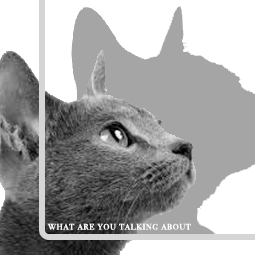
<style>
.page{position:relative;width:255px;height:255px;background:#ffffff}
.page>*{position:absolute;margin:0}
.t1{font:12.5px "BodoniSvtyTwoSCITCTT-Book";letter-spacing:0.03em;color:#ffffff}
</style>
<div class="page">
<p class="t1" style="left:47px;top:223px;width:144px;height:7px">what are you talking about</p>
</div>
